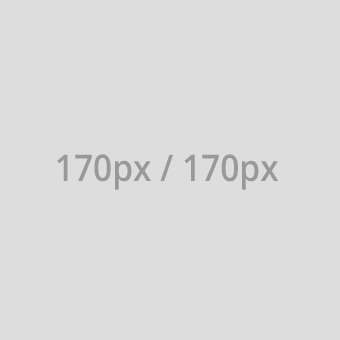
<style>
.page{position:relative;width:340px;height:340px;background:#dddddd}
.page>*{position:absolute;margin:0}
.t1{font:36.9px "OpenSans-Semibold";color:#999999;scale:0.91 1}
</style>
<div class="page">
<p class="t1" style="left:57px;top:154px;width:222px;height:36px">170px / 170px</p>
</div>
